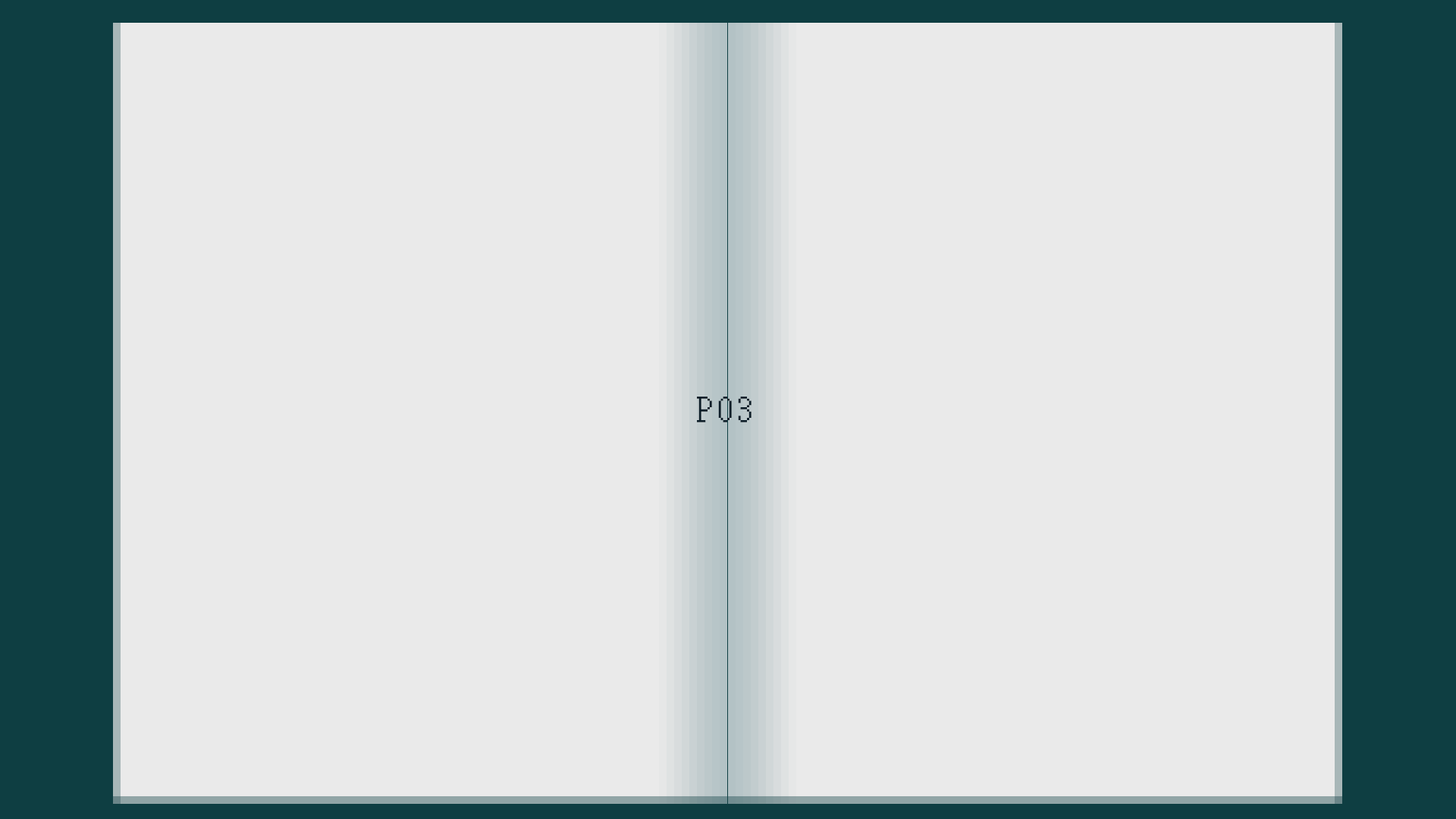
<style>
.page{position:relative;width:1456px;height:819px;background:#eaeaea}
.page>*{position:absolute;margin:0}
.t1{font:34.1px "KH-Dot-kagurazaka-16";letter-spacing:0.12em;color:#0a192d}
</style>
<div class="page">
<p class="t1" style="left:697px;top:397px;width:54px;height:25px">P03</p>
</div>
